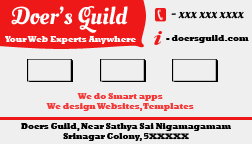
<style>
.page{position:relative;width:252px;height:144px;background:#efefef}
.page>*{position:absolute;margin:0}
.t1{font:24px "OleoScriptSwashCaps-Regular";color:#ffffff}
.t2{font:14px "OleoScriptSwashCaps-Regular";color:#000000}
.t3{font:8px "Rockwell-ExtraBold";color:#ffffff}
.t4{font:8px "Rockwell-ExtraBold";color:#000000}
.t5{font:8px "Rockwell-ExtraBold";color:#f33838}
</style>
<div class="page">
<p class="t1" style="left:11px;top:6px;width:117px;height:27px">Doer’s Guild</p>
<p class="t2" style="left:171px;top:11px;width:73px;height:8px">- xxx xxx xxxx</p>
<p class="t3" style="left:5px;top:36px;width:131px;height:8px">Your Web Experts Anywhere</p>
<p class="t4" style="left:166px;top:35px;width:83px;height:8px">- doersguild.com</p>
<p class="t5" style="left:46px;top:93px;width:148px;height:18px;text-align:center">We do Smart apps<br>We design Websites, Templates</p>
<p class="t4" style="left:21px;top:123px;width:210px;height:18px;text-align:center">Doers Guild, Near Sathya Sai Nigamagamam<br>Srinagar Colony, 5XXXXX</p>
</div>
